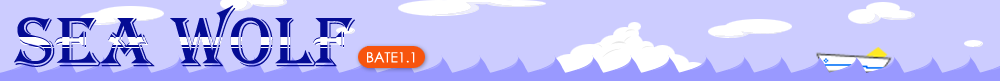
<style>
.page{position:relative;width:1000px;height:81px;background:#ccccff}
.page>*{position:absolute;margin:0}
.t1{font:72px "Algerian";color:#050c94;text-transform:uppercase}
.t2{font:14px "STXihei";color:#ffffff;text-transform:uppercase}
</style>
<div class="page">
<p class="t1" style="left:14px;top:5px;width:341px;height:62px">SEA WOLF</p>
<p class="t2" style="left:367px;top:51px;width:48px;height:12px">bate1.1</p>
</div>
